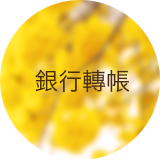
<style>
.page{position:relative;width:160px;height:160px;background:#ffffff}
.page>*{position:absolute;margin:0}
.t1{font:24px "HiraginoSansGB-W3";color:#472e08}
</style>
<div class="page">
<p class="t1" style="left:35px;top:69px;width:95px;height:24px">銀行轉帳</p>
</div>
